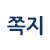
<style>
.page{position:relative;width:50px;height:50px;background:#ffffff}
.page>*{position:absolute;margin:0}
.t1{font:20px "NanumGothicBold";color:#0e3769}
</style>
<div class="page">
<p class="t1" style="left:7px;top:16px;width:36px;height:20px">쪽지</p>
</div>
